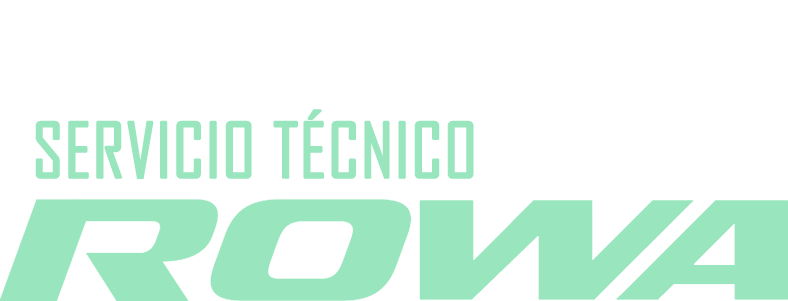
<style>
.page{position:relative;width:788px;height:301px;background:#ffffff}
.page>*{position:absolute;margin:0}
.t1{font:73px "AgencyFB-Reg";color:#99e6be;text-transform:uppercase;font-weight:bold}
</style>
<div class="page">
<p class="t1" style="left:35px;top:109px;width:439px;height:70px">Servicio Técnico</p>
</div>
